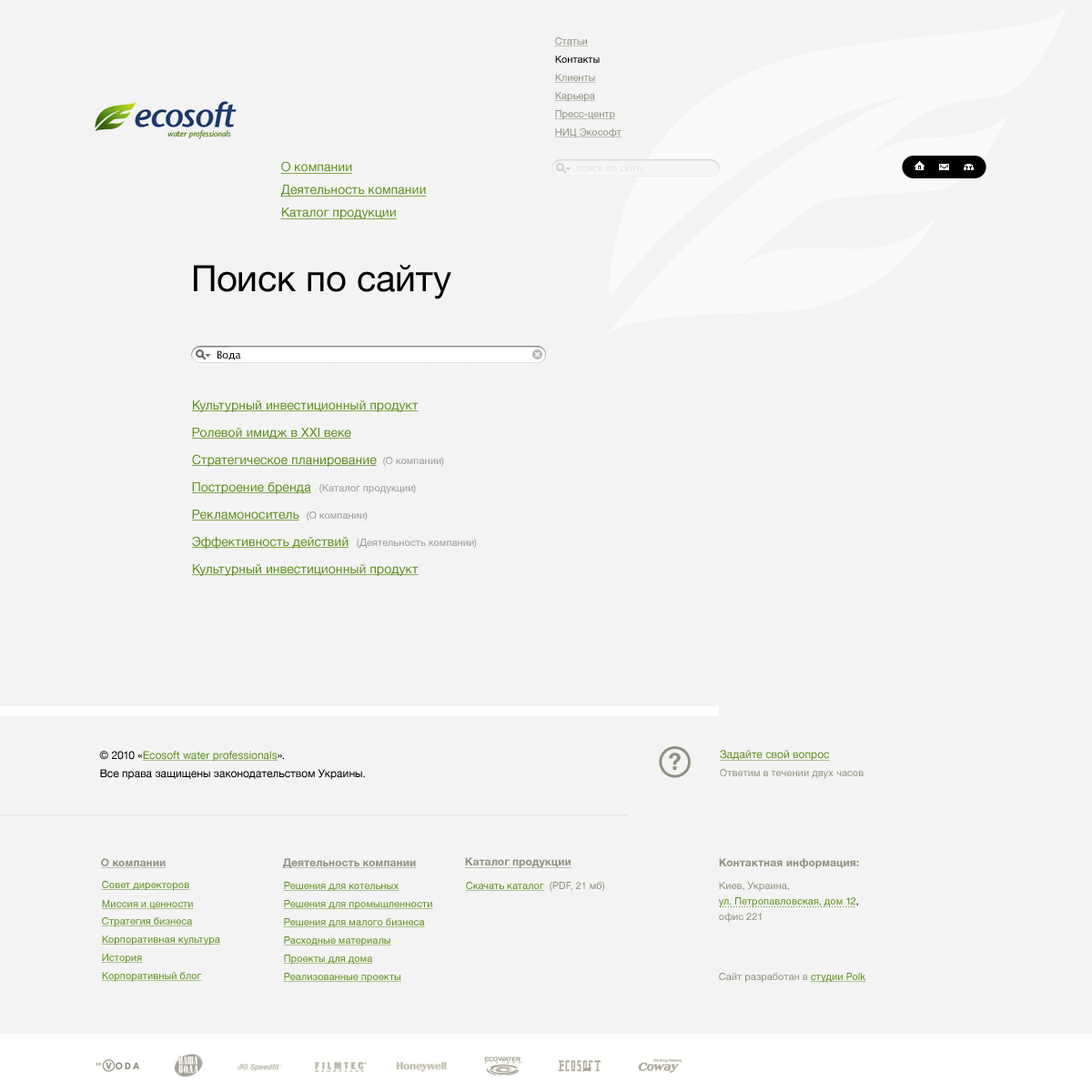
<style>
.page{position:relative;width:1092px;height:1092px;background:#f3f3f3}
.page>*{position:absolute;margin:0}
.t1{font:10px "HelveticaNeue";color:#8b9380;text-decoration:underline}
.t2{font:10px "HelveticaNeue";color:#000000}
.t3{font:12.7px "HelveticaNeue";color:#5e901f;text-decoration:underline}
.t4{font:36.4px "HelveticaNeue";color:#000000}
.t5{font:10px "LucidaGrande";color:#000000}
.t6{font:10px "HelveticaNeue";color:#999999}
.t7{font:10.9px "HelveticaNeue";color:#5e901f;text-decoration:underline}
.t8{font:10.9px/18.2px "HelveticaNeue";color:#000000}
.t9{font:10.9px/18.2px "HelveticaNeue";color:#5e901f;text-decoration:underline}
.t10{font:10px "HelveticaNeue";color:#8b9380}
.t11{font:10.9px "HelveticaNeue-Bold";color:#8b9380;text-decoration:underline}
.t12{font:10px/15.5px "HelveticaNeue";color:#5e901f}
.t13{font:10.9px/18.2px "HelveticaNeue-Bold";color:#8b9380}
.t14{font:10px/22.7px "HelveticaNeue";color:#8b9380}
.t15{font:10px/15.5px "HelveticaNeue";color:#000000}
.t16{font:10px/15.5px "HelveticaNeue";color:#8b9380}
.t17{font:10px "HelveticaNeue";color:#5e901f;text-decoration:underline}
</style>
<div class="page">
<p class="t1" style="left:554px;top:37px;width:34px;height:9px">Статьи</p>
<p class="t2" style="left:555px;top:56px;width:45px;height:7px">Контакты</p>
<p class="t1" style="left:554px;top:74px;width:42px;height:9px">Клиенты</p>
<p class="t1" style="left:554px;top:92px;width:41px;height:10px">Карьера</p>
<p class="t1" style="left:554px;top:110px;width:61px;height:10px">Пресс-центр</p>
<p class="t1" style="left:554px;top:128px;width:68px;height:10px">НИЦ Экософт</p>
<p class="t3" style="left:280px;top:161px;width:73px;height:13px">О компании</p>
<p class="t3" style="left:280px;top:185px;width:147px;height:12px">Деятельность компании</p>
<p class="t3" style="left:280px;top:207px;width:117px;height:12px">Каталог продукции</p>
<p class="t4" style="left:194px;top:265px;width:257px;height:34px">Поиск по сайту</p>
<p class="t5" style="left:217px;top:350px;width:24px;height:10px">Вода</p>
<p class="t3" style="left:191px;top:400px;width:228px;height:12px">Культурный инвестиционный продукт</p>
<p class="t3" style="left:191px;top:428px;width:160px;height:12px">Ролевой имидж в XXI веке</p>
<p class="t3" style="left:191px;top:454px;width:186px;height:13px">Стратегическое планирование</p>
<p class="t6" style="left:383px;top:457px;width:61px;height:10px">(О компании)</p>
<p class="t3" style="left:191px;top:481px;width:120px;height:13px">Построение бренда</p>
<p class="t6" style="left:319px;top:484px;width:97px;height:10px">(Каталог продукции)</p>
<p class="t3" style="left:191px;top:510px;width:108px;height:11px">Рекламоноситель</p>
<p class="t6" style="left:307px;top:511px;width:61px;height:10px">(О компании)</p>
<p class="t3" style="left:191px;top:536px;width:158px;height:13px">Эффективность действий</p>
<p class="t6" style="left:357px;top:539px;width:120px;height:10px">(Деятельность компании)</p>
<p class="t3" style="left:191px;top:564px;width:228px;height:12px">Культурный инвестиционный продукт</p>
<p class="t7" style="left:719px;top:750px;width:111px;height:11px">Задайте свой вопрос</p>
<p class="t8" style="left:99px;top:751px;width:266px;height:29px">© 2010 «<span class="t9">Ecosoft water professionals</span>».<br>Все права защищены законодательством Украины.</p>
<p class="t10" style="left:720px;top:769px;width:144px;height:10px">Ответим в течении двух часов</p>
<p class="t11" style="left:464px;top:857px;width:107px;height:11px">Каталог продукции</p>
<p class="t11" style="left:100px;top:858px;width:67px;height:10px">О компании</p>
<p class="t11" style="left:282px;top:858px;width:135px;height:10px">Деятельность компании</p>
<p class="t12" style="left:718px;top:858px;width:141px;height:65px"><span class="t13">Контактная информация:<br></span><span class="t14">Киев, Украина,<br></span>ул. Петропавловская, дом 12<span class="t15">,<br></span><span class="t16">офис 221</span></p>
<p class="t17" style="left:101px;top:881px;width:89px;height:10px">Совет директоров</p>
<p class="t17" style="left:283px;top:882px;width:116px;height:9px">Решения для котельных</p>
<p class="t17" style="left:465px;top:882px;width:79px;height:9px">Скачать каталог</p>
<p class="t10" style="left:550px;top:882px;width:54px;height:10px">(PDF, 21 мб)</p>
<p class="t17" style="left:101px;top:900px;width:93px;height:9px">Миссия и ценности</p>
<p class="t17" style="left:283px;top:900px;width:150px;height:10px">Решения для промышленности</p>
<p class="t17" style="left:101px;top:917px;width:92px;height:10px">Стратегия бизнеса</p>
<p class="t17" style="left:283px;top:918px;width:142px;height:9px">Решения для малого бизнеса</p>
<p class="t17" style="left:101px;top:935px;width:119px;height:10px">Корпоративная культура</p>
<p class="t17" style="left:283px;top:936px;width:108px;height:10px">Расходные материалы</p>
<p class="t17" style="left:101px;top:954px;width:42px;height:10px">История</p>
<p class="t17" style="left:283px;top:955px;width:90px;height:10px">Проекты для дома</p>
<p class="t17" style="left:101px;top:972px;width:101px;height:10px">Корпоративный блог</p>
<p class="t17" style="left:283px;top:973px;width:118px;height:10px">Реализованные проекты</p>
<p class="t10" style="left:719px;top:973px;width:146px;height:10px">Сайт разработан в <span class="t17">студии Polk</span></p>
</div>
